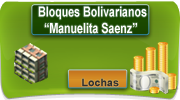
<style>
.page{position:relative;width:180px;height:100px}
.page>*{position:absolute;margin:0}
.t1{font:13.9px/16.7px "Arial-BoldMT";color:#ffffff;scale:0.77 1}
.t2{font:10.4px "Arial-BoldMT";color:#303030;scale:1.03 1}
.t3{font:20.8px "Arial-BoldMT";color:#303030;scale:1.03 1}
</style>
<div class="page">
<p class="t1" style="left:38px;top:6px;width:109px;height:28px">Bloques Bolivarianos<br>     “Manuelita Saenz”</p>
<p class="t2" style="left:82px;top:78px;width:37px;height:9px"><span class="t3"><br></span>Lochas</p>
</div>
